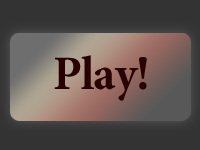
<style>
.page{position:relative;width:200px;height:150px;background:#333333}
.page>*{position:absolute;margin:0}
.t1{font:48px "MinionPro-Bold";letter-spacing:-0.02em;color:#280000}
</style>
<div class="page">
<p class="t1" style="left:54px;top:55px;width:93px;height:46px">Play!</p>
</div>
